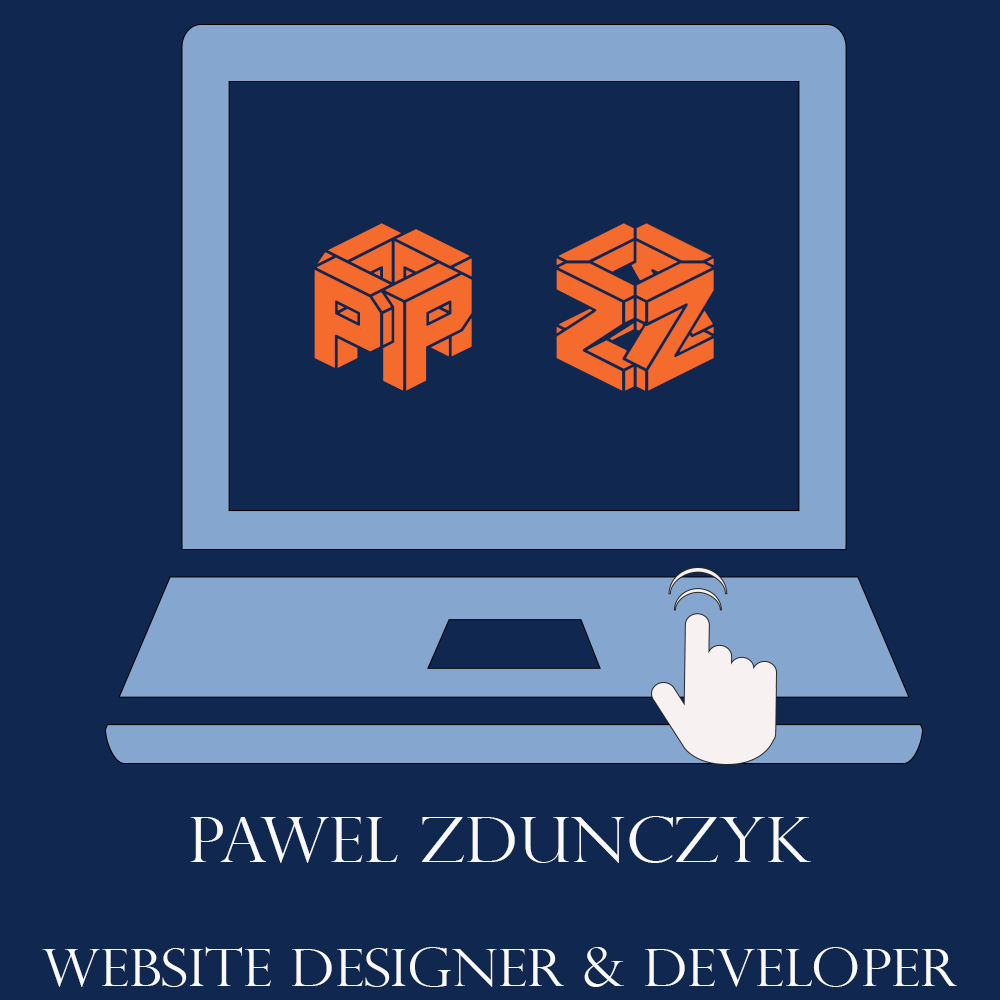
<style>
.page{position:relative;width:1000px;height:1000px;background:#10284f}
.page>*{position:absolute;margin:0}
.t1{font:250px "3DLETBRK";letter-spacing:-0.1em;color:#f56a2d;text-transform:uppercase}
.t2{font:51.8px/62.1px "PerpetuaTitlingMT-Light";color:#f9f9f9;text-transform:uppercase;scale:1.1 1}
.t3{font:62.1px/62.1px "PerpetuaTitlingMT-Light";color:#f9f9f9;text-transform:uppercase;scale:1.1 1}
</style>
<div class="page">
<p class="t1" style="left:314px;top:223px;width:400px;height:168px">P Z</p>
<p class="t2" style="left:42px;top:816px;width:915px;height:171px;text-align:center"><span class="t3">Pawel Zdunczyk<br></span><br>Website designer &amp; Developer</p>
</div>
